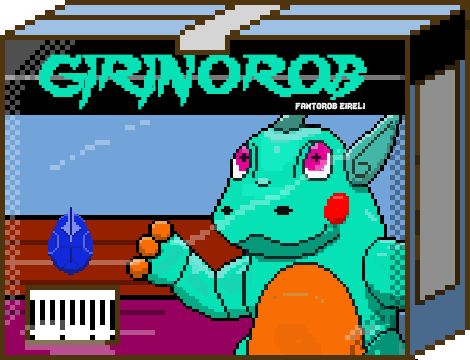
<style>
.page{position:relative;width:470px;height:360px}
.page>*{position:absolute;margin:0}
.t1{font:48.3px "Lady-Radical";color:#06e2b6;scale:0.93 1}
.t2{font:12px "Lady-Radical";color:#fbfbfb}
</style>
<div class="page">
<p class="t1" style="left:39px;top:54px;width:328px;height:56px">GIRINOROB</p>
<p class="t2" style="left:295px;top:102px;width:70px;height:8px">fantorob eireli</p>
</div>
